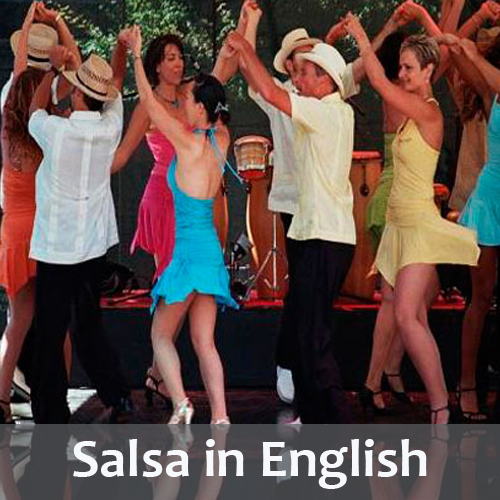
<style>
.page{position:relative;width:500px;height:500px}
.page>*{position:absolute;margin:0}
.t1{font:53.3px "Candara-Bold";color:#f7f8fb;scale:1.03 1}
</style>
<div class="page">
<p class="t1" style="left:73px;top:439px;width:354px;height:50px">Salsa in English</p>
</div>
